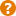
<style>
.page{position:relative;width:16px;height:16px;background:#e47b00}
.page>*{position:absolute;margin:0}
.t1{font:16px "SegoeUI-Bold";color:#ffffff}
</style>
<div class="page">
<p class="t1" style="left:5px;top:3px;width:7px;height:11px">?</p>
</div>
